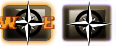
<style>
.page{position:relative;width:119px;height:46px}
.page>*{position:absolute;margin:0}
.t1{font:18px "old+sailor"}
</style>
<div class="page">
<p class="t1" style="left:41px;top:16px;width:14px;height:14px">E</p>
</div>
